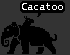
<style>
.page{position:relative;width:70px;height:55px;background:#333333}
.page>*{position:absolute;margin:0}
.t1{font:10px "FiraMono-Regular";color:#ffffff}
</style>
<div class="page">
<p class="t1" style="left:21px;top:2px;width:42px;height:9px">Cacatoo</p>
</div>
